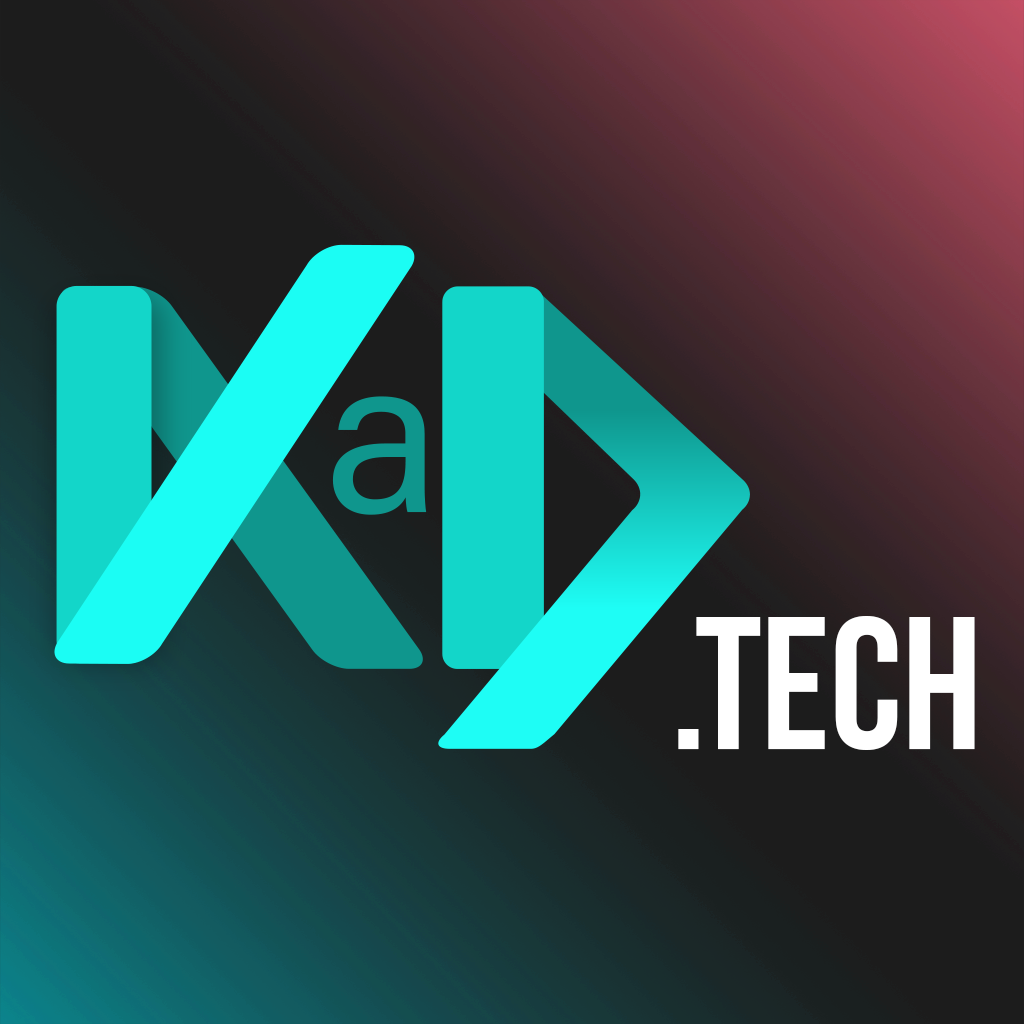
<style>
.page{position:relative;width:1024px;height:1024px}
.page>*{position:absolute;margin:0}
.t1{font:187px "BebasNeue-Bold";color:#ffffff}
</style>
<div class="page">
<p class="t1" style="left:678px;top:616px;width:297px;height:134px">.tech</p>
</div>
